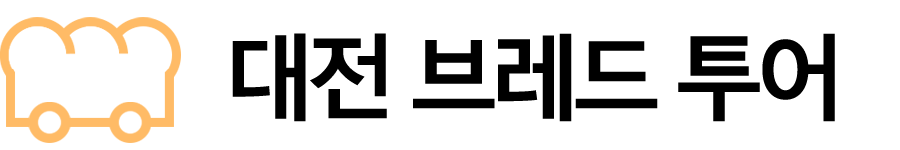
<style>
.page{position:relative;width:900px;height:150px;background:#ffffff}
.page>*{position:absolute;margin:0}
.t1{font:93px "MalgunGothicBold";letter-spacing:-0.125em;color:#000000}
</style>
<div class="page">
<p class="t1" style="left:232px;top:33px;width:603px;height:89px">대전 브레드 투어</p>
</div>
